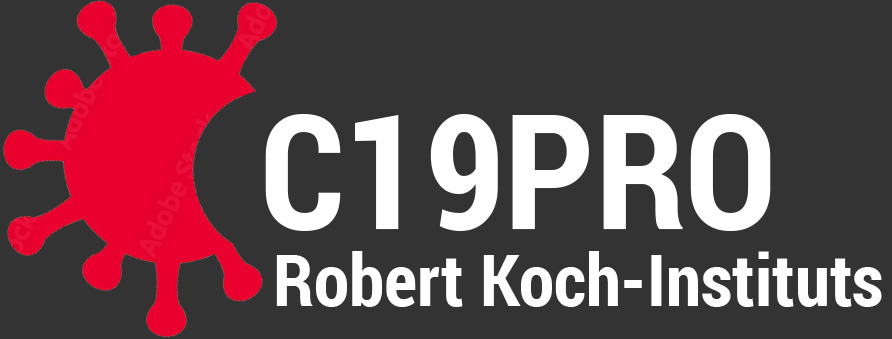
<style>
.page{position:relative;width:892px;height:339px;background:#333333}
.page>*{position:absolute;margin:0}
.t1{font:160px "RobotoCondensed-Bold";color:#ffffff}
.t2{font:72px "RobotoCondensed-Bold";color:#ffffff}
</style>
<div class="page">
<p class="t1" style="left:265px;top:114px;width:506px;height:117px">C19PRO</p>
<p class="t2" style="left:276px;top:251px;width:606px;height:56px">Robert Koch-Instituts UI</p>
</div>
